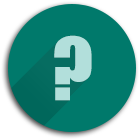
<style>
.page{position:relative;width:140px;height:140px;background:#00796b}
.page>*{position:absolute;margin:0}
.t1{font:80px "Impact";color:#b2dfdb}
</style>
<div class="page">
<p class="t1" style="left:54px;top:35px;width:38px;height:66px">?</p>
</div>
